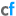
<style>
.page{position:relative;width:16px;height:16px;background:#ffffff}
.page>*{position:absolute;margin:0}
.t1{font:18px "Cabin-Bold";color:#666666}
.t2{font:18px "Cabin-Bold";color:#00a0ff}
</style>
<div class="page">
<p class="t1" style="left:1px;top:6px;width:8px;height:10px">c</p>
<p class="t2" style="left:8px;top:1px;width:7px;height:15px">f</p>
</div>
